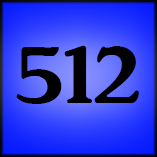
<style>
.page{position:relative;width:157px;height:157px}
.page>*{position:absolute;margin:0}
.t1{font:88px "ARJULIAN";color:#000000}
</style>
<div class="page">
<p class="t1" style="left:16px;top:45px;width:123px;height:59px">512</p>
</div>
